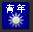
<style>
.page{position:relative;width:33px;height:32px;background:#000090}
.page>*{position:absolute;margin:0}
.t1{font:10.4px "SimSun";color:#ffffff}
</style>
<div class="page">
<p class="t1" style="left:6px;top:4px;width:19px;height:9px">青年</p>
</div>
